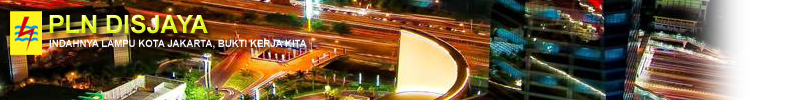
<style>
.page{position:relative;width:800px;height:100px}
.page>*{position:absolute;margin:0}
.t1{font:25px "Arial-BoldMT"}
.t2{font:10px "Arial-BoldMT";color:#fefefe;scale:0.97 1}
</style>
<div class="page">
<p class="t1" style="left:49px;top:14px;width:159px;height:20px">PLN DISJAYA</p>
<p class="t2" style="left:49px;top:39px;width:258px;height:10px">INDAHNYA LAMPU KOTA JAKARTA, BUKTI KERJA KITA</p>
</div>
